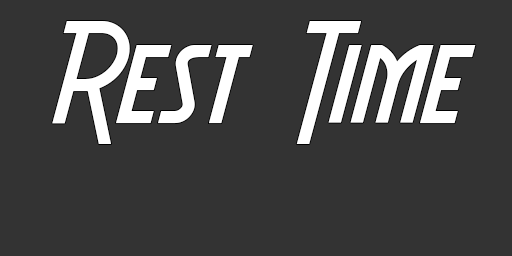
<style>
.page{position:relative;width:512px;height:256px;background:#333333}
.page>*{position:absolute;margin:0}
.t1{font:150px "AeroviasBrasilNF";color:#ffffff}
</style>
<div class="page">
<p class="t1" style="left:52px;top:21px;width:424px;height:123px">Rest Time</p>
</div>
